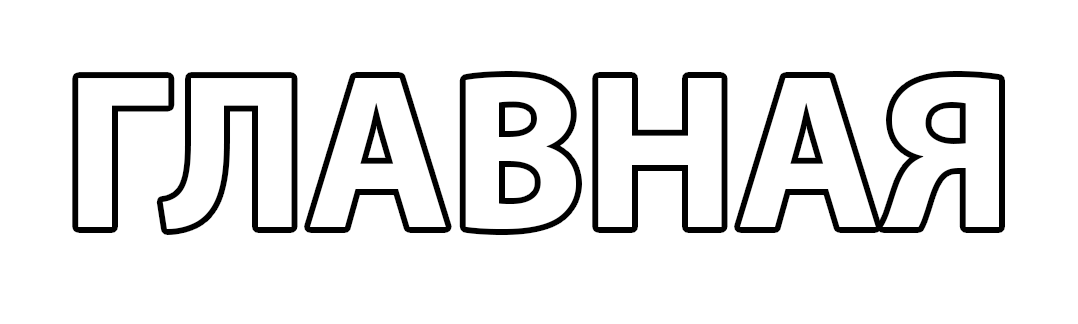
<style>
.page{position:relative;width:1078px;height:324px;background:#ffffff}
.page>*{position:absolute;margin:0}
.t1{font:220.8px "MyriadPro-Bold";color:#ffffff}
</style>
<div class="page">
<p class="t1" style="left:78px;top:76px;width:921px;height:153px">ГЛАВНАЯ</p>
</div>
